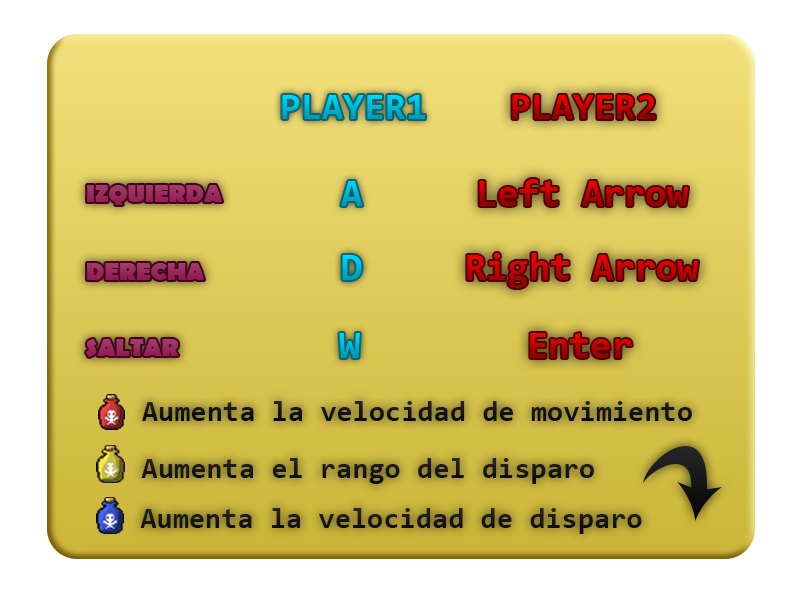
<style>
.page{position:relative;width:800px;height:600px;background:#ffffff}
.page>*{position:absolute;margin:0}
.t1{font:38.3px "Consolas-Bold"}
.t2{font:24.9px "BerlinSansFB-Bold";color:#9b2d60}
.t3{font:38.6px "Consolas-Bold"}
.t4{font:24.9px "BerlinSansFB-Bold";color:#992a5d}
.t5{font:29.5px "Consolas-Bold";color:#000000}
.t6{font:29.5px "Consolas-Bold";color:#161616}
</style>
<div class="page">
<p class="t1" style="left:282px;top:95px;width:143px;height:24px">PLAYER1</p>
<p class="t1" style="left:512px;top:95px;width:143px;height:24px">PLAYER2</p>
<p class="t2" style="left:87px;top:185px;width:136px;height:20px">IZQUIERDA</p>
<p class="t3" style="left:341px;top:181px;width:22px;height:25px">A</p>
<p class="t3" style="left:479px;top:179px;width:209px;height:27px">Left Arrow</p>
<p class="t3" style="left:342px;top:255px;width:20px;height:25px">D</p>
<p class="t3" style="left:467px;top:253px;width:232px;height:35px">Right Arrow</p>
<p class="t4" style="left:87px;top:263px;width:118px;height:17px">DERECHA</p>
<p class="t4" style="left:86px;top:339px;width:93px;height:18px">SALTAR</p>
<p class="t3" style="left:339px;top:333px;width:21px;height:25px">W</p>
<p class="t3" style="left:530px;top:333px;width:102px;height:25px">Enter</p>
<p class="t5" style="left:142px;top:401px;width:550px;height:20px">Aumenta la velocidad de movimiento</p>
<p class="t5" style="left:141px;top:458px;width:453px;height:26px">Aumenta el rango del disparo</p>
<p class="t6" style="left:140px;top:508px;width:502px;height:26px">Aumenta la velocidad de disparo</p>
</div>
